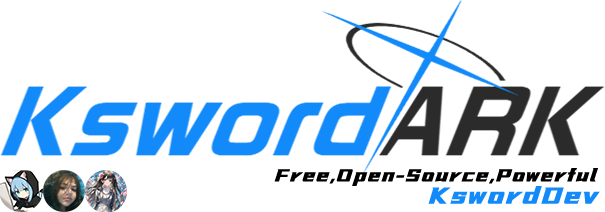
<style>
.page{position:relative;width:605px;height:212px;background:#ffffff}
.page>*{position:absolute;margin:0}
.t1{font:21.2px "YouSheBiaoTiHei";letter-spacing:0.025em;color:#000000;font-style:italic}
.t2{font:28.2px "YouSheBiaoTiHei";letter-spacing:0.025em;color:#128afa;font-style:italic}
</style>
<div class="page">
<p class="t1" style="left:274px;top:168px;width:324px;height:18px">Free,Open-Source,Powerful</p>
<p class="t2" style="left:428px;top:186px;width:172px;height:18px">KswordDev</p>
</div>
